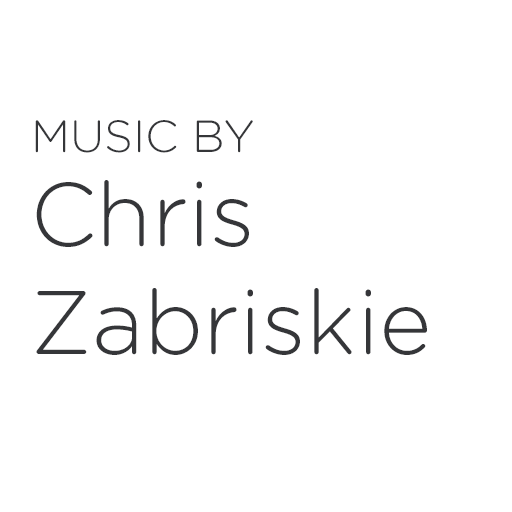
<style>
.page{position:relative;width:512px;height:512px;background:#ffffff}
.page>*{position:absolute;margin:0}
.t1{font:45px "GothamRounded-Light";color:#353639}
.t2{font:90px "GothamRounded-Light";color:#353639}
</style>
<div class="page">
<p class="t1" style="left:35px;top:120px;width:218px;height:33px">MUSIC BY</p>
<p class="t2" style="left:36px;top:180px;width:391px;height:175px">Chris <br>Zabriskie</p>
</div>
